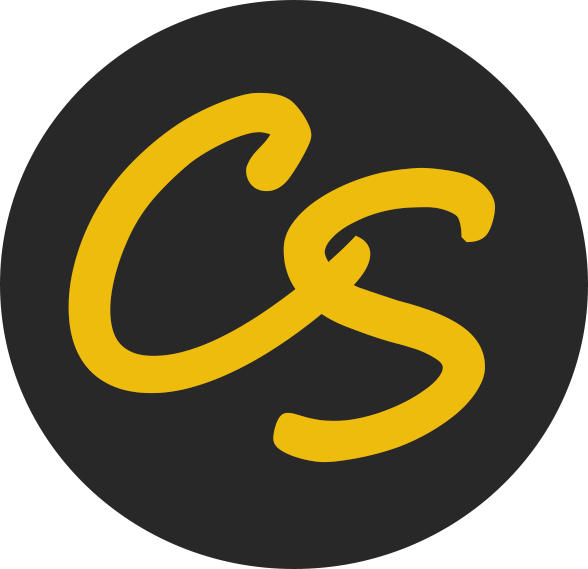
<style>
.page{position:relative;width:588px;height:569px;background:#282828}
.page>*{position:absolute;margin:0}
.t1{font:375px "SegoeScript";color:#eebc0d;font-weight:bold}
</style>
<div class="page">
<p class="t1" style="left:68px;top:92px;width:303px;height:302px">C</p>
<p class="t1" style="left:273px;top:167px;width:222px;height:296px">S</p>
</div>
